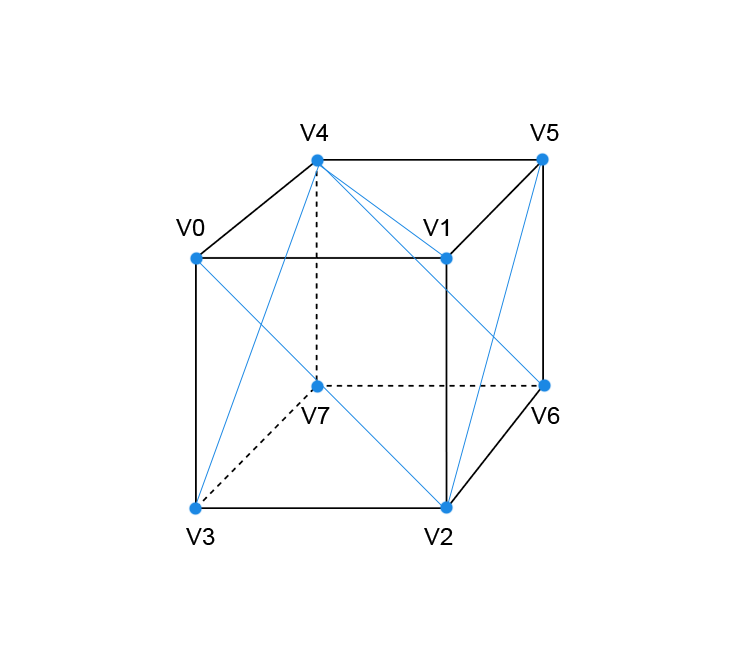
<style>
.page{position:relative;width:738px;height:669px;background:#ffffff}
.page>*{position:absolute;margin:0}
.t1{font:24px "ArialMT";color:#000000}
</style>
<div class="page">
<p class="t1" style="left:300px;top:124px;width:29px;height:17px">V4</p>
<p class="t1" style="left:530px;top:124px;width:29px;height:17px">V5</p>
<p class="t1" style="left:176px;top:219px;width:29px;height:17px">V0</p>
<p class="t1" style="left:423px;top:219px;width:26px;height:17px">V1</p>
<p class="t1" style="left:301px;top:407px;width:29px;height:17px">V7</p>
<p class="t1" style="left:531px;top:407px;width:29px;height:17px">V6</p>
<p class="t1" style="left:186px;top:528px;width:29px;height:17px">V3</p>
<p class="t1" style="left:424px;top:528px;width:29px;height:17px">V2</p>
</div>
